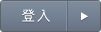
<style>
.page{position:relative;width:101px;height:32px}
.page>*{position:absolute;margin:0}
.t1{font:14px "MicrosoftJhengHeiRegular";letter-spacing:0.1em;color:#ffffff}
</style>
<div class="page">
<p class="t1" style="left:22px;top:9px;width:28px;height:13px">登入</p>
</div>
